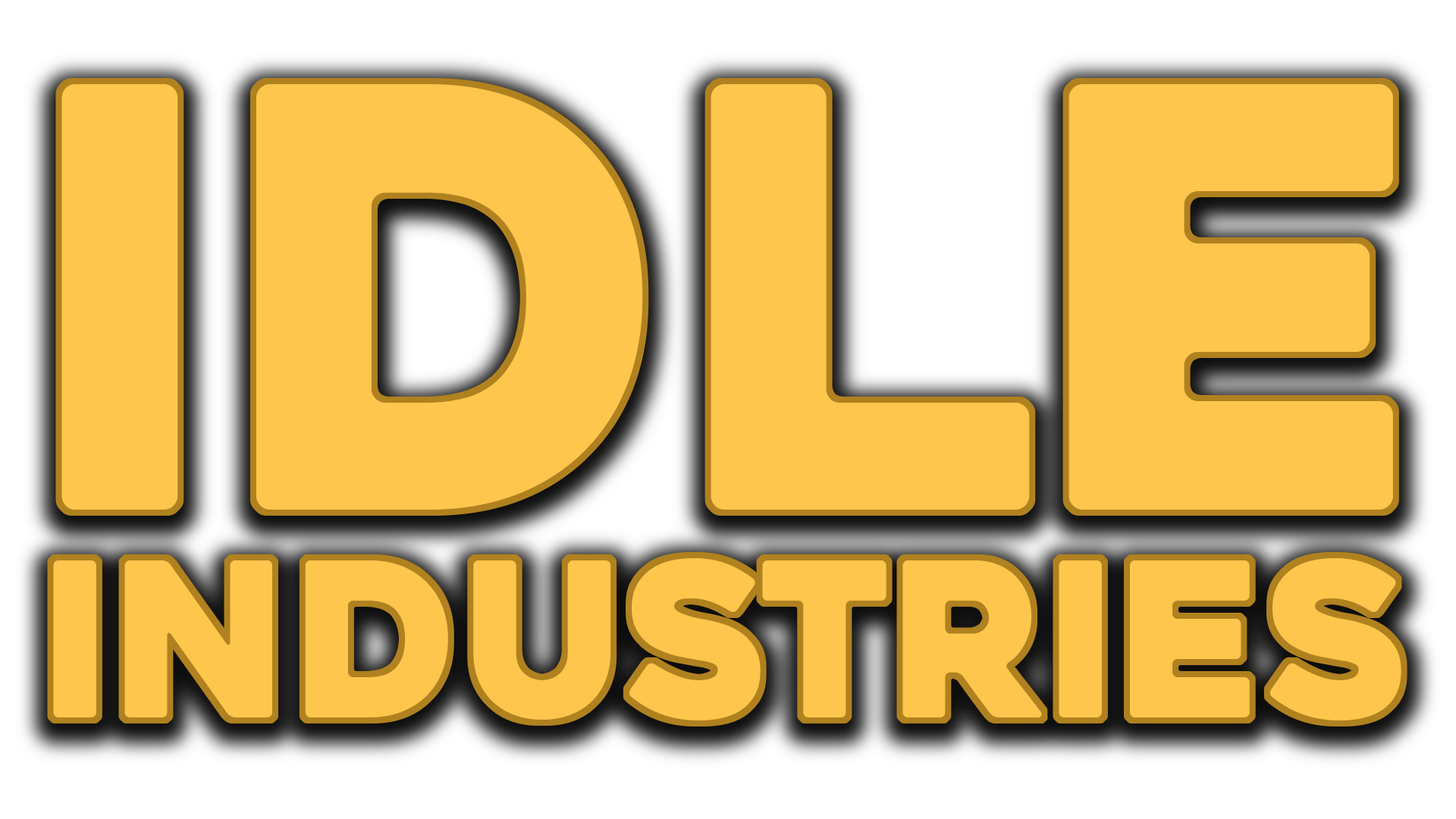
<style>
.page{position:relative;width:1456px;height:819px;background:#ffc64d}
.page>*{position:absolute;margin:0}
.t1{font:581.4px "Heavitas";color:#ffc64d}
.t2{font:214.9px "Heavitas";color:#ffc64d}
</style>
<div class="page">
<p class="t1" style="left:61px;top:84px;width:1332px;height:426px">IDLE</p>
<p class="t2" style="left:53px;top:558px;width:1348px;height:162px">industries</p>
</div>
